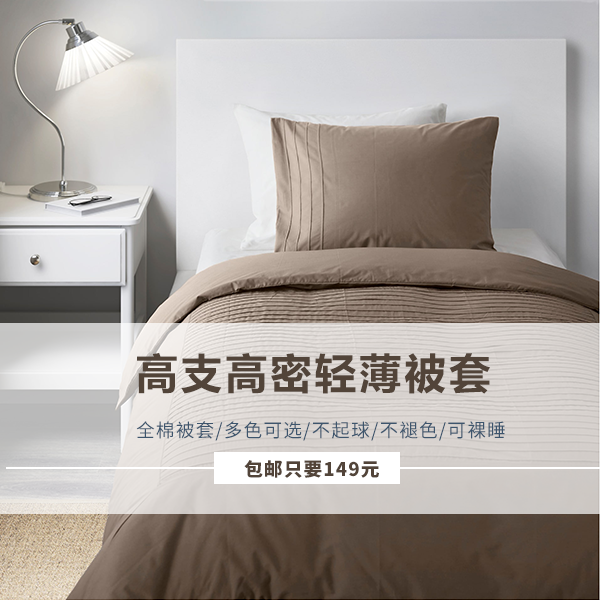
<style>
.page{position:relative;width:600px;height:600px}
.page>*{position:absolute;margin:0}
.t1{font:41.4px "MicrosoftYaHei-Bold";letter-spacing:0.08em;color:#524439}
.t2{font:18.7px "SourceHanSansCN-Regular";letter-spacing:0.06em;color:#3d556d}
.t3{font:18.7px "SourceHanSansCN-Heavy";letter-spacing:0.06em;color:#524439}
</style>
<div class="page">
<p class="t1" style="left:137px;top:353px;width:353px;height:41px">高支高密轻薄被套</p>
<p class="t2" style="left:136px;top:421px;width:369px;height:20px">全棉被套/多色可选/不起球/不褪色/可裸睡</p>
<p class="t3" style="left:244px;top:460px;width:135px;height:18px">包邮只要149元</p>
</div>
